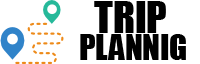
<style>
.page{position:relative;width:200px;height:64px;background:#ffffff}
.page>*{position:absolute;margin:0}
.t1{font:40.7px "Impact";color:#000000}
.t2{font:32.5px "Impact";color:#000000}
</style>
<div class="page">
<p class="t1" style="left:94px;top:1px;width:72px;height:32px">TRIP</p>
<p class="t2" style="left:80px;top:34px;width:106px;height:26px">PLANNIG</p>
</div>
